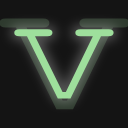
<style>
.page{position:relative;width:128px;height:128px;background:#141414}
.page>*{position:absolute;margin:0}
.t1{font:214.6px "CourierNewPSMT";scale:1.12 1}
.t2{font:163.7px "CourierNewPSMT";color:#9edf9c;scale:1.12 1}
</style>
<div class="page">
<p class="t1" style="left:0px;top:18px;width:130px;height:92px">v</p>
<p class="t2" style="left:14px;top:29px;width:100px;height:70px">v</p>
</div>
